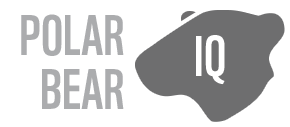
<style>
.page{position:relative;width:290px;height:127px;background:#ffffff}
.page>*{position:absolute;margin:0}
.t1{font:55.5px/54px "WWF";color:#abacae}
.t2{font:55.5px "WWF";color:#ffffff}
.t3{font:62.5px "WWF";color:#ffffff}
</style>
<div class="page">
<p class="t1" style="left:21px;top:14px;width:103px;height:95px;text-align:right">POLAR<br>BEAR</p>
<p class="t2" style="left:196px;top:35px;width:29px;height:50px"><span class="t3"> </span>IQ</p>
</div>
